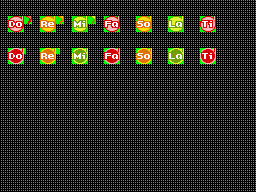
<style>
.page{position:relative;width:256px;height:192px;background:#000000}
.page>*{position:absolute;margin:0}
.t1{font:8px "Omelette-Thick-Plain-Regular";letter-spacing:-0.1em;color:#ffffff}
.t2{font:8px "Omelette-Thick-Plain-Regular";letter-spacing:-0.3em;color:#ffffff}
.t3{font:8px "Omelette-Thick-Plain-Regular";color:#ffffff}
</style>
<div class="page">
<p class="t1" style="left:9px;top:21px;width:13px;height:6px">Do</p>
<p class="t1" style="left:41px;top:21px;width:13px;height:6px">Re</p>
<p class="t2" style="left:74px;top:21px;width:11px;height:6px">M<span class="t1">i</span></p>
<p class="t1" style="left:105px;top:21px;width:13px;height:6px">Fa</p>
<p class="t1" style="left:137px;top:21px;width:13px;height:6px">So</p>
<p class="t1" style="left:169px;top:21px;width:13px;height:6px">L<span class="t3">a</span></p>
<p class="t2" style="left:202px;top:21px;width:10px;height:6px">T<span class="t1">i</span></p>
<p class="t1" style="left:9px;top:53px;width:13px;height:6px">Do</p>
<p class="t1" style="left:41px;top:53px;width:13px;height:6px">Re</p>
<p class="t2" style="left:74px;top:53px;width:11px;height:6px">M<span class="t1">i</span></p>
<p class="t1" style="left:105px;top:53px;width:13px;height:6px">Fa</p>
<p class="t1" style="left:137px;top:53px;width:13px;height:6px">So</p>
<p class="t1" style="left:169px;top:53px;width:13px;height:6px">L<span class="t3">a</span></p>
<p class="t2" style="left:202px;top:53px;width:10px;height:6px">Ti</p>
</div>
